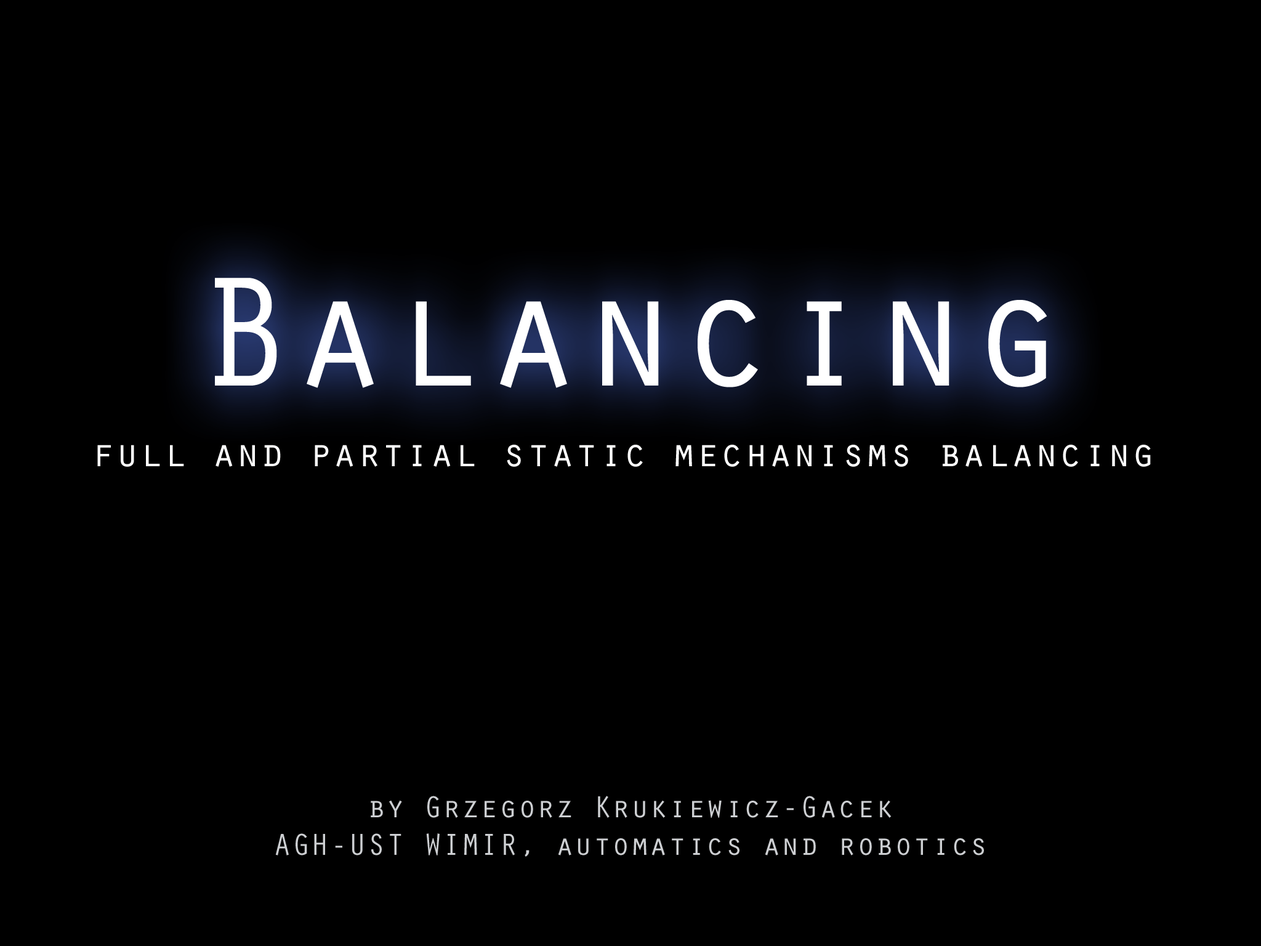
<style>
.page{position:relative;width:1261px;height:946px;background:#000000}
.page>*{position:absolute;margin:0}
.t1{font:161.3px "OratorStd";color:#ffffff}
.t2{font:40.3px "OratorStd";color:#ffffff}
.t3{font:26.9px "OratorStd";color:#ffffff}
.t4{font:31.4px "OratorStd";color:#cdcfd2}
</style>
<div class="page">
<p class="t1" style="left:215px;top:278px;width:832px;height:110px">Balancing</p>
<p class="t2" style="left:97px;top:445px;width:1054px;height:22px"><span class="t3"><br></span>full and partial static mechanisms balancing</p>
<p class="t4" style="left:275px;top:795px;width:709px;height:61px;text-align:center">by Grzegorz Krukiewicz-Gacek<br>AGH-UST WIMIR, automatics and robotics</p>
</div>
